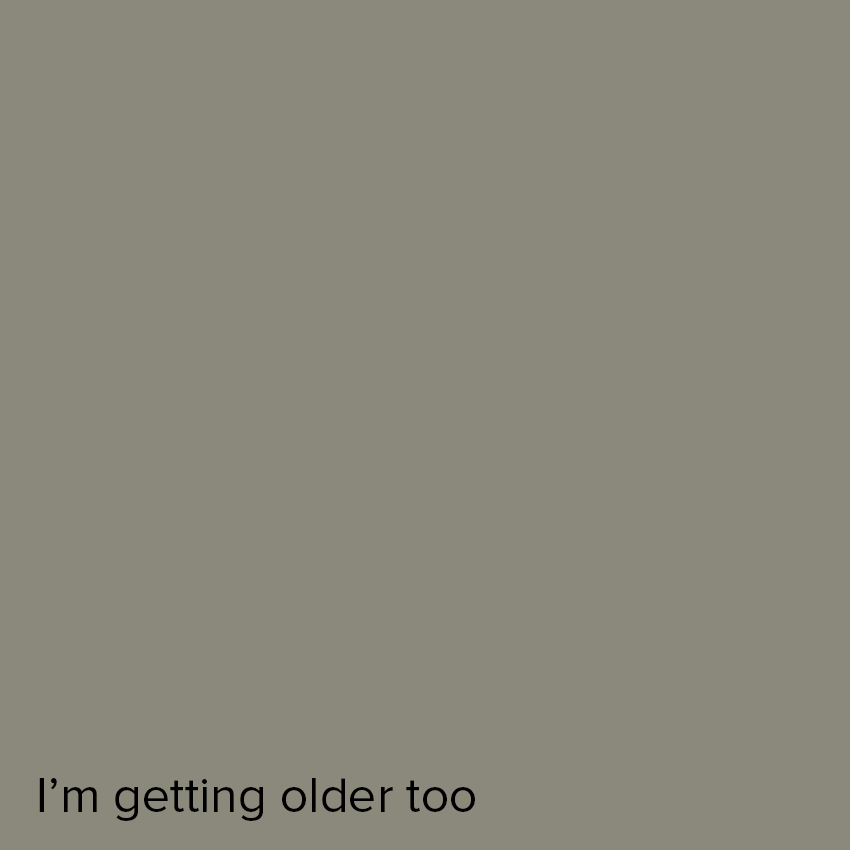
<style>
.page{position:relative;width:850px;height:850px;background:#8a897c}
.page>*{position:absolute;margin:0}
.t1{font:12px "ProximaNova-Regular";color:#000000}
</style>
<div class="page">
<p class="t1" style="left:39px;top:778px;width:436px;height:43px;text-align:center">I’m getting older too</p>
</div>
